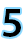
<style>
.page{position:relative;width:25px;height:53px;background:#ffffff}
.page>*{position:absolute;margin:0}
.t1{font:42px "MyriadPro-Semibold";letter-spacing:0.025em;color:#000000;text-transform:uppercase}
</style>
<div class="page">
<p class="t1" style="left:2px;top:9px;width:19px;height:28px">5</p>
</div>
